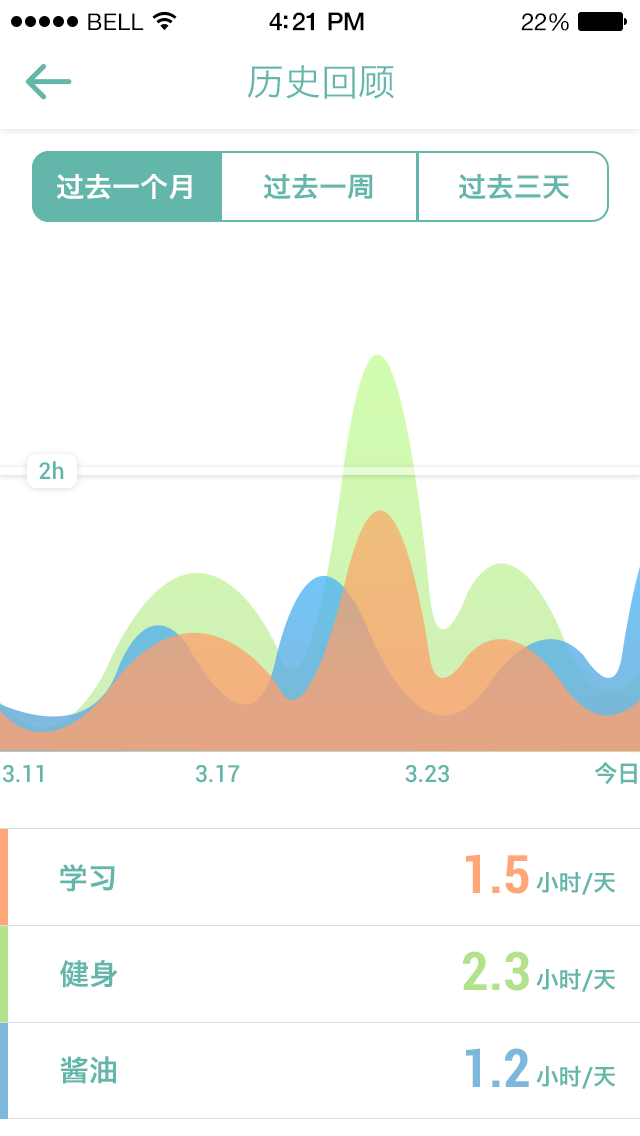
<style>
.page{position:relative;width:640px;height:1136px;background:#ffffff}
.page>*{position:absolute;margin:0}
.t1{font:23px "HelveticaNeue";letter-spacing:0.02em;color:#000000}
.t2{font:25px "HelveticaNeue-Medium";letter-spacing:-0.02em;color:#000000}
.t3{font:24px "HelveticaNeue";letter-spacing:-0.02em;color:#000000}
.t4{font:37.3px "HiraginoSansGB-W3";color:#63b7aa}
.t5{font:27.5px "HiraginoSansGB-W6";color:#ffffff}
.t6{font:27.5px "HiraginoSansGB-W6";color:#63b7aa}
.t7{font:22.9px "Roboto-Medium";color:#63b7aa}
.t8{font:23.4px "Roboto-Medium";color:#63b7aa}
.t9{font:23.4px "HiraginoSansGB-W6";color:#63b7aa}
.t10{font:53.3px "Roboto-BoldCondensed";color:#ffa679}
.t11{font:29.4px "HiraginoSansGB-W6";color:#63b7aa}
.t12{font:23px "HiraginoSansGB-W6";color:#63b7aa}
.t13{font:53.3px "Roboto-BoldCondensed";color:#b2e28c}
.t14{font:53.3px "Roboto-BoldCondensed";color:#7db7db}
</style>
<div class="page">
<p class="t1" style="left:88px;top:13px;width:56px;height:17px">BELL</p>
<p class="t2" style="left:269px;top:12px;width:95px;height:19px">4:21 PM</p>
<p class="t3" style="left:521px;top:13px;width:48px;height:18px">22%</p>
<p class="t4" style="left:247px;top:65px;width:147px;height:34px">历史回顾</p>
<p class="t5" style="left:56px;top:173px;width:136px;height:27px">过去一个月</p>
<p class="t6" style="left:263px;top:174px;width:110px;height:26px">过去一周</p>
<p class="t6" style="left:458px;top:174px;width:111px;height:26px">过去三天</p>
<p class="t7" style="left:39px;top:461px;width:25px;height:18px">2h</p>
<p class="t8" style="left:3px;top:765px;width:40px;height:18px">3.11</p>
<p class="t8" style="left:196px;top:765px;width:44px;height:18px">3.17</p>
<p class="t8" style="left:405px;top:765px;width:44px;height:18px">3.23</p>
<p class="t9" style="left:595px;top:762px;width:42px;height:23px">今日</p>
<p class="t10" style="left:466px;top:854px;width:63px;height:40px">1.5</p>
<p class="t11" style="left:60px;top:864px;width:55px;height:28px">学习</p>
<p class="t12" style="left:536px;top:872px;width:80px;height:23px">小时/天</p>
<p class="t13" style="left:463px;top:951px;width:66px;height:40px">2.3</p>
<p class="t11" style="left:60px;top:960px;width:58px;height:28px">健身</p>
<p class="t12" style="left:536px;top:969px;width:80px;height:23px">小时/天</p>
<p class="t14" style="left:466px;top:1048px;width:63px;height:39px">1.2</p>
<p class="t11" style="left:60px;top:1056px;width:57px;height:28px">酱油</p>
<p class="t12" style="left:536px;top:1066px;width:80px;height:23px">小时/天</p>
</div>
